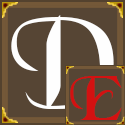
<style>
.page{position:relative;width:125px;height:125px;background:#564534}
.page>*{position:absolute;margin:0}
.t1{font:107.9px "BlackChancery";color:#fefefe}
.t2{font:61.9px "BlackChancery";color:#d31111}
</style>
<div class="page">
<p class="t1" style="left:11px;top:15px;width:103px;height:94px">D</p>
<p class="t2" style="left:70px;top:76px;width:52px;height:44px">E</p>
</div>
